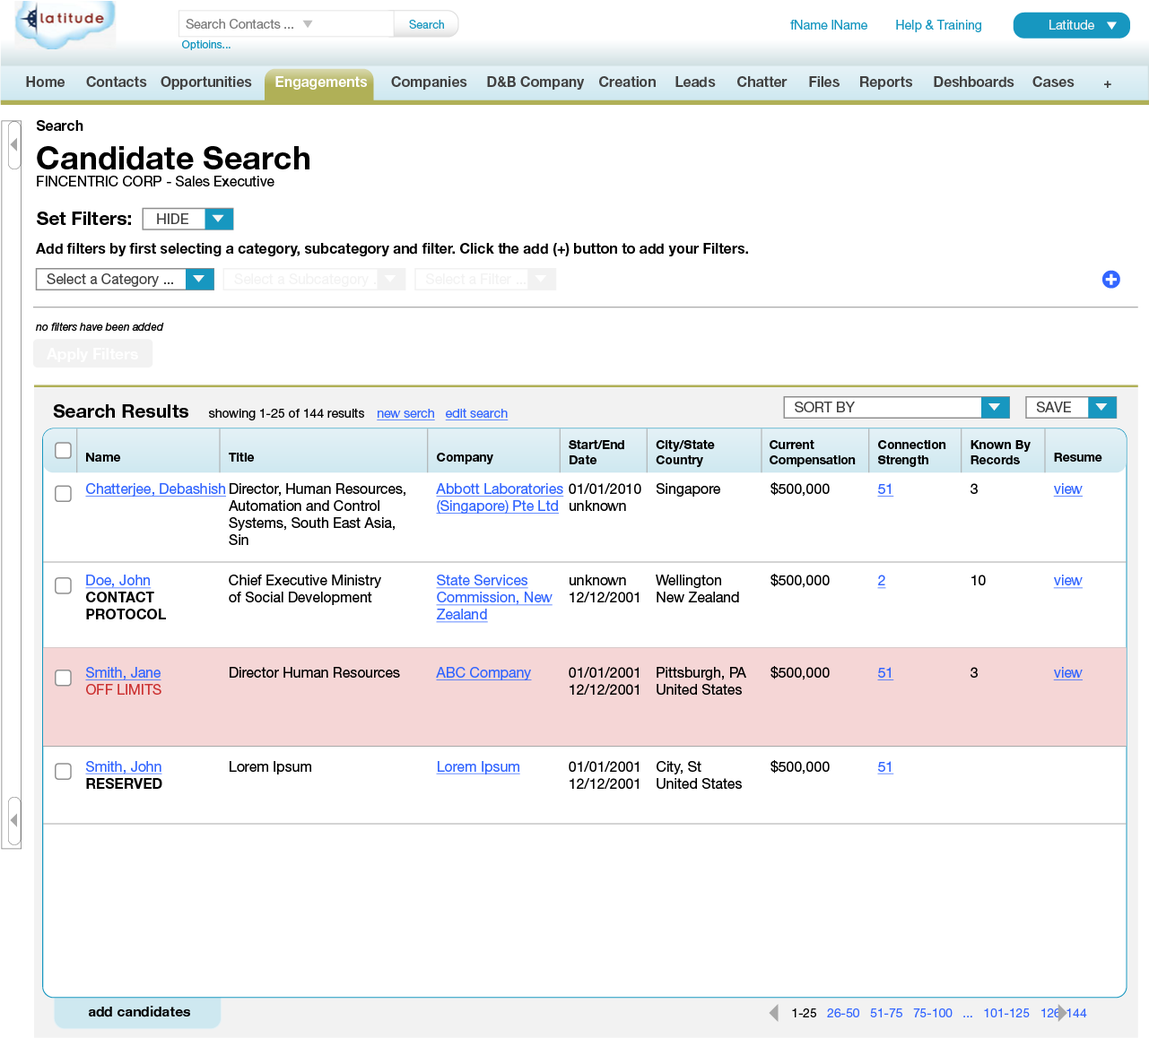
<style>
.page{position:relative;width:1149px;height:1038px;background:#ffffff}
.page>*{position:absolute;margin:0}
.t1{font:12.6px "HelveticaNeue-Roman";color:#797979}
.t2{font:11.3px "HelveticaNeue-Roman";color:#1797c0}
.t3{font:12.6px "HelveticaNeue-Roman";color:#1797c0}
.t4{font:12.6px "HelveticaNeue-Roman";color:#f5f5f5}
.t5{font:10.8px "HelveticaNeue-Roman";color:#1797c0}
.t6{font:14.1px "HelveticaNeue-Bold";color:#424242}
.t7{font:14.1px "HelveticaNeue-Bold";color:#ffffff}
.t8{font:14.1px "HelveticaNeue-Roman";color:#000000}
.t9{font:14.1px "HelveticaNeue-Bold";color:#000000}
.t10{font:32.3px "HelveticaNeue-Bold";color:#000000}
.t11{font:18.8px "HelveticaNeue-Bold";color:#000000}
.t12{font:14.1px "HelveticaNeue-Roman";color:#424242}
.t13{font:14.2px "HelveticaNeue-Bold";color:#000000}
.t14{font:14.1px "HelveticaNeue-Roman";color:#f2f2f2}
.t15{font:10.8px "HelveticaNeue-Italic";color:#000000}
.t16{font:15.5px "HelveticaNeue-Bold";color:#ffffff}
.t17{font:12.6px "HelveticaNeue-Roman";color:#000000}
.t18{font:12.6px "HelveticaNeue-Roman";color:#3366ff;text-decoration:underline}
.t19{font:12.4px "HelveticaNeue-Bold";color:#000000}
.t20{font:14.2px "HelveticaNeue-Roman";color:#3366ff;text-decoration:underline}
.t21{font:14.2px "HelveticaNeue-Roman";color:#000000}
.t22{font:14.2px "HelveticaNeue-Roman";color:#cc3333}
.t23{font:13.9px "HelveticaNeue-Bold";color:#000000}
.t24{font:12.4px "HelveticaNeue-Roman";color:#3366ff}
.t25{font:12.4px "HelveticaNeue-Roman";color:#000000}
</style>
<div class="page">
<p class="t1" style="left:186px;top:19px;width:107px;height:10px">Search Contacts ...</p>
<p class="t2" style="left:409px;top:20px;width:35px;height:9px">Search</p>
<p class="t3" style="left:790px;top:20px;width:191px;height:12px">fName lName        Help &amp; Training</p>
<p class="t4" style="left:1049px;top:20px;width:45px;height:10px">Latitude</p>
<p class="t5" style="left:182px;top:40px;width:48px;height:10px">Optioins...</p>
<p class="t6" style="left:26px;top:76px;width:39px;height:11px">Home</p>
<p class="t6" style="left:86px;top:76px;width:61px;height:11px">Contacts</p>
<p class="t6" style="left:160px;top:76px;width:92px;height:14px">Opportunities</p>
<p class="t7" style="left:275px;top:76px;width:92px;height:14px">Engagements</p>
<p class="t6" style="left:391px;top:76px;width:76px;height:14px">Companies</p>
<p class="t6" style="left:487px;top:76px;width:98px;height:14px">D&amp;B Company</p>
<p class="t6" style="left:599px;top:76px;width:56px;height:11px">Creation</p>
<p class="t6" style="left:675px;top:76px;width:40px;height:12px">Leads</p>
<p class="t6" style="left:737px;top:76px;width:50px;height:11px">Chatter</p>
<p class="t6" style="left:809px;top:76px;width:30px;height:11px">Files</p>
<p class="t6" style="left:860px;top:76px;width:52px;height:14px">Reports</p>
<p class="t6" style="left:933px;top:76px;width:81px;height:12px">Deshboards</p>
<p class="t6" style="left:1032px;top:76px;width:42px;height:11px">Cases</p>
<p class="t6" style="left:1104px;top:81px;width:7px;height:7px">+</p>
<p class="t8" style="left:37px;top:120px;width:272px;height:66px"><span class="t9">Search<br></span><span class="t10">Candidate Search<br></span>FINCENTRIC CORP - Sales Executive</p>
<p class="t11" style="left:37px;top:212px;width:94px;height:13px">Set Filters:</p>
<p class="t12" style="left:157px;top:213px;width:31px;height:11px">HIDE</p>
<p class="t13" style="left:36px;top:243px;width:712px;height:13px">Add filters by first selecting a category, subcategory and filter. Click the add (+) button to add your Filters.</p>
<p class="t12" style="left:47px;top:273px;width:126px;height:14px">Select a Category ...</p>
<p class="t14" style="left:234px;top:273px;width:150px;height:14px">Select a Subcategory ...</p>
<p class="t14" style="left:426px;top:273px;width:99px;height:11px">Select a Filter ...</p>
<p class="t15" style="left:36px;top:323px;width:128px;height:8px">no filters have been added</p>
<p class="t16" style="left:47px;top:348px;width:91px;height:14px">Apply Filters</p>
<p class="t12" style="left:794px;top:402px;width:60px;height:10px">SORT BY</p>
<p class="t12" style="left:1036px;top:402px;width:35px;height:10px">SAVE</p>
<p class="t11" style="left:53px;top:404px;width:135px;height:14px">Search Results</p>
<p class="t17" style="left:209px;top:408px;width:155px;height:12px">showing 1-25 of 144 results</p>
<p class="t18" style="left:377px;top:409px;width:58px;height:11px">new serch</p>
<p class="t18" style="left:445px;top:408px;width:63px;height:12px">edit search</p>
<p class="t19" style="left:568px;top:439px;width:56px;height:25px">Start/End<br>Date</p>
<p class="t19" style="left:655px;top:439px;width:60px;height:28px">City/State<br>Country</p>
<p class="t19" style="left:769px;top:439px;width:86px;height:28px">Current<br>Compensation</p>
<p class="t19" style="left:878px;top:439px;width:68px;height:28px">Connection<br>Strength</p>
<p class="t19" style="left:970px;top:440px;width:60px;height:25px">Known By<br>Records</p>
<p class="t19" style="left:86px;top:453px;width:35px;height:9px">Name</p>
<p class="t19" style="left:229px;top:452px;width:26px;height:10px">Title</p>
<p class="t19" style="left:437px;top:453px;width:56px;height:11px">Company</p>
<p class="t19" style="left:1053px;top:453px;width:49px;height:9px">Resume</p>
<p class="t20" style="left:85px;top:483px;width:141px;height:14px">Chatterjee, Debashish</p>
<p class="t21" style="left:229px;top:483px;width:176px;height:62px">Director, Human Resources,<br>Automation and Control<br>Systems, South East Asia,<br>Sin</p>
<p class="t20" style="left:436px;top:483px;width:128px;height:31px">Abbott Laboratories<br>(Singapore) Pte Ltd</p>
<p class="t21" style="left:568px;top:483px;width:73px;height:28px">01/01/2010<br>unknown</p>
<p class="t21" style="left:656px;top:483px;width:64px;height:14px">Singapore</p>
<p class="t21" style="left:770px;top:482px;width:59px;height:15px">$500,000</p>
<p class="t20" style="left:877px;top:483px;width:17px;height:14px">51</p>
<p class="t21" style="left:970px;top:483px;width:7px;height:11px">3</p>
<p class="t20" style="left:1053px;top:483px;width:29px;height:14px">view</p>
<p class="t13" style="left:85px;top:575px;width:81px;height:45px"><span class="t20">Doe, John<br></span>CONTACT<br>PROTOCOL</p>
<p class="t21" style="left:229px;top:575px;width:152px;height:30px">Chief Executive Ministry<br>of Social Development</p>
<p class="t20" style="left:436px;top:575px;width:116px;height:48px">State Services<br>Commission, New<br>Zealand</p>
<p class="t21" style="left:569px;top:575px;width:69px;height:28px">unknown<br>12/12/2001</p>
<p class="t21" style="left:655px;top:575px;width:84px;height:28px">Wellington<br>New Zealand</p>
<p class="t21" style="left:770px;top:574px;width:59px;height:14px">$500,000</p>
<p class="t20" style="left:877px;top:575px;width:9px;height:14px">2</p>
<p class="t21" style="left:971px;top:575px;width:14px;height:10px">10</p>
<p class="t20" style="left:1053px;top:575px;width:29px;height:14px">view</p>
<p class="t20" style="left:85px;top:667px;width:76px;height:28px">Smith, Jane<br><span class="t22">OFF LIMITS</span></p>
<p class="t21" style="left:230px;top:667px;width:170px;height:11px">Director Human Resources</p>
<p class="t20" style="left:436px;top:667px;width:96px;height:14px">ABC Company</p>
<p class="t21" style="left:568px;top:667px;width:70px;height:28px">01/01/2001<br>12/12/2001</p>
<p class="t21" style="left:656px;top:667px;width:90px;height:28px">Pittsburgh, PA<br>United States</p>
<p class="t21" style="left:770px;top:666px;width:59px;height:15px">$500,000</p>
<p class="t20" style="left:877px;top:667px;width:17px;height:14px">51</p>
<p class="t21" style="left:970px;top:667px;width:7px;height:11px">3</p>
<p class="t20" style="left:1053px;top:667px;width:29px;height:14px">view</p>
<p class="t20" style="left:85px;top:761px;width:77px;height:28px">Smith, John<br><span class="t13">RESERVED</span></p>
<p class="t21" style="left:230px;top:761px;width:81px;height:14px">Lorem Ipsum</p>
<p class="t20" style="left:436px;top:761px;width:84px;height:14px">Lorem Ipsum</p>
<p class="t21" style="left:568px;top:761px;width:70px;height:28px">01/01/2001<br>12/12/2001</p>
<p class="t21" style="left:656px;top:761px;width:85px;height:28px">City, St<br>United States</p>
<p class="t21" style="left:770px;top:760px;width:59px;height:15px">$500,000</p>
<p class="t20" style="left:877px;top:761px;width:17px;height:14px">51</p>
<p class="t23" style="left:88px;top:1006px;width:102px;height:12px">add candidates</p>
<p class="t24" style="left:792px;top:1008px;width:295px;height:10px"><span class="t25">1-25   </span>26-50   51-75   75-100   ...   101-125   126-144</p>
</div>
